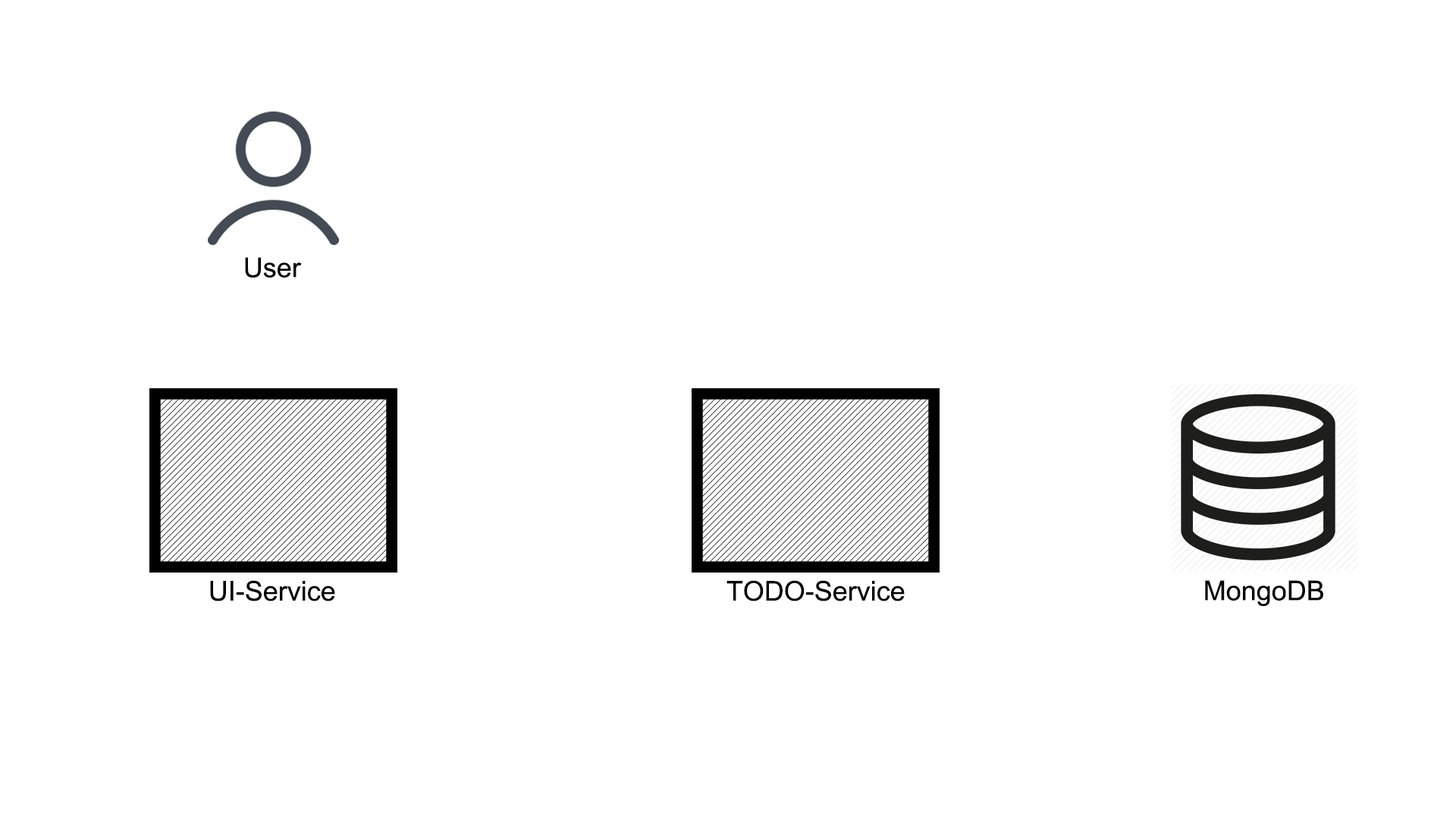
<style>
.page{position:relative;width:1456px;height:819px;background:#ffffff}
.page>*{position:absolute;margin:0}
.t1{font:27.3px "ArialMT";color:#000000}
</style>
<div class="page">
<p class="t1" style="left:245px;top:257px;width:57px;height:21px">User</p>
<p class="t1" style="left:210px;top:580px;width:125px;height:21px">UI-Service</p>
<p class="t1" style="left:726px;top:580px;width:179px;height:21px">TODO-Service</p>
<p class="t1" style="left:1205px;top:580px;width:118px;height:27px">MongoDB</p>
</div>
